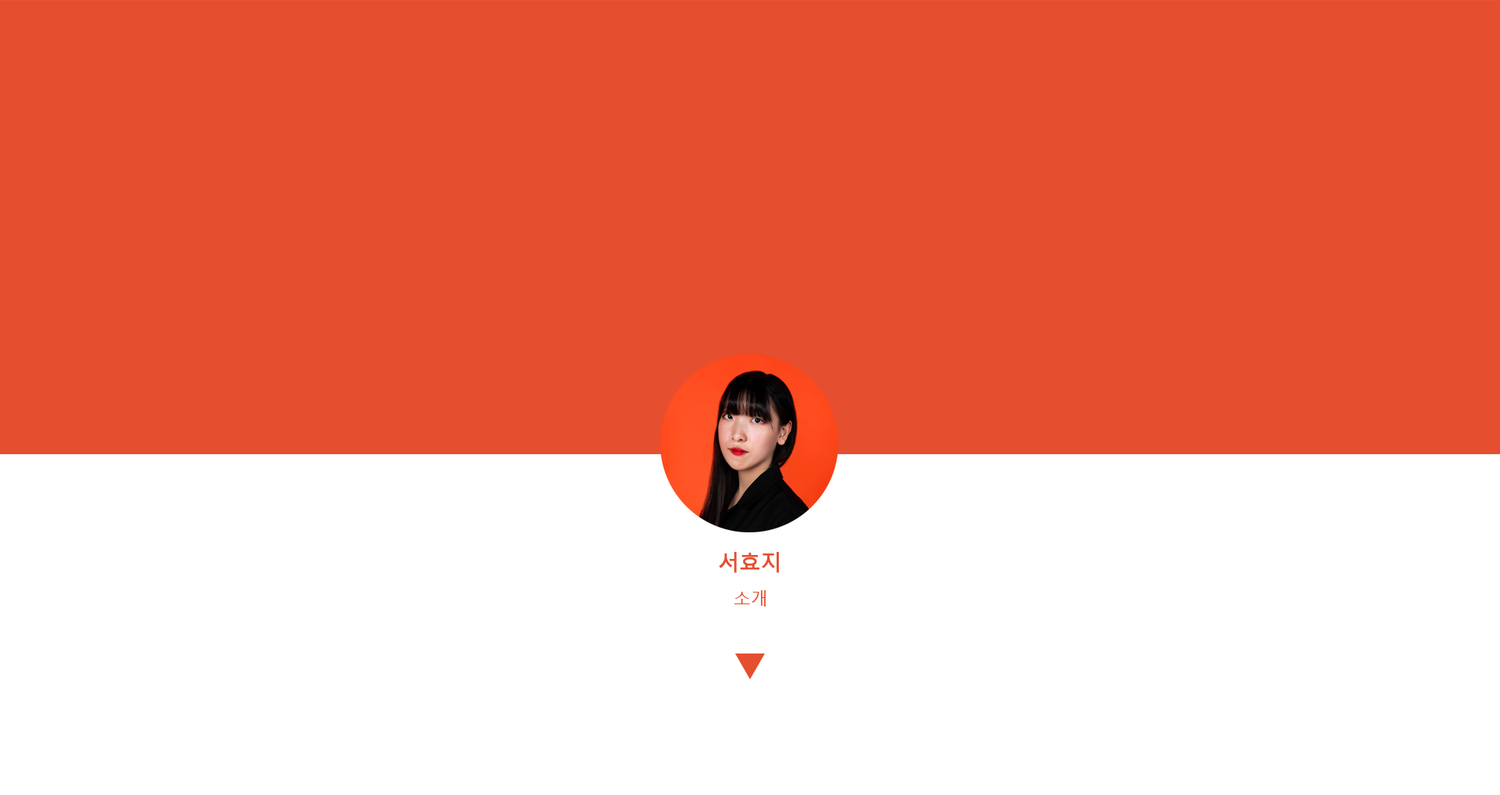
<style>
.page{position:relative;width:1500px;height:795px;background:#e54e2f}
.page>*{position:absolute;margin:0}
.t1{font:20.8px "MalgunGothic";color:#e54e2f;font-weight:bold}
.t2{font:17.4px "MalgunGothic";color:#e54e2f}
</style>
<div class="page">
<p class="t1" style="left:719px;top:552px;width:60px;height:21px">서효지</p>
<p class="t2" style="left:735px;top:590px;width:31px;height:16px">소개</p>
</div>
